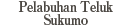
<style>
.page{position:relative;width:132px;height:27px;background:#ffffff}
.page>*{position:absolute;margin:0}
.t1{font:14px/13px "RyuminPro-ExBold";letter-spacing:-0.04em;color:#4c4843;scale:0.9 1}
</style>
<div class="page">
<p class="t1" style="left:18px;top:1px;width:95px;height:24px;text-align:center">Pelabuhan Teluk<br>Sukumo</p>
</div>
